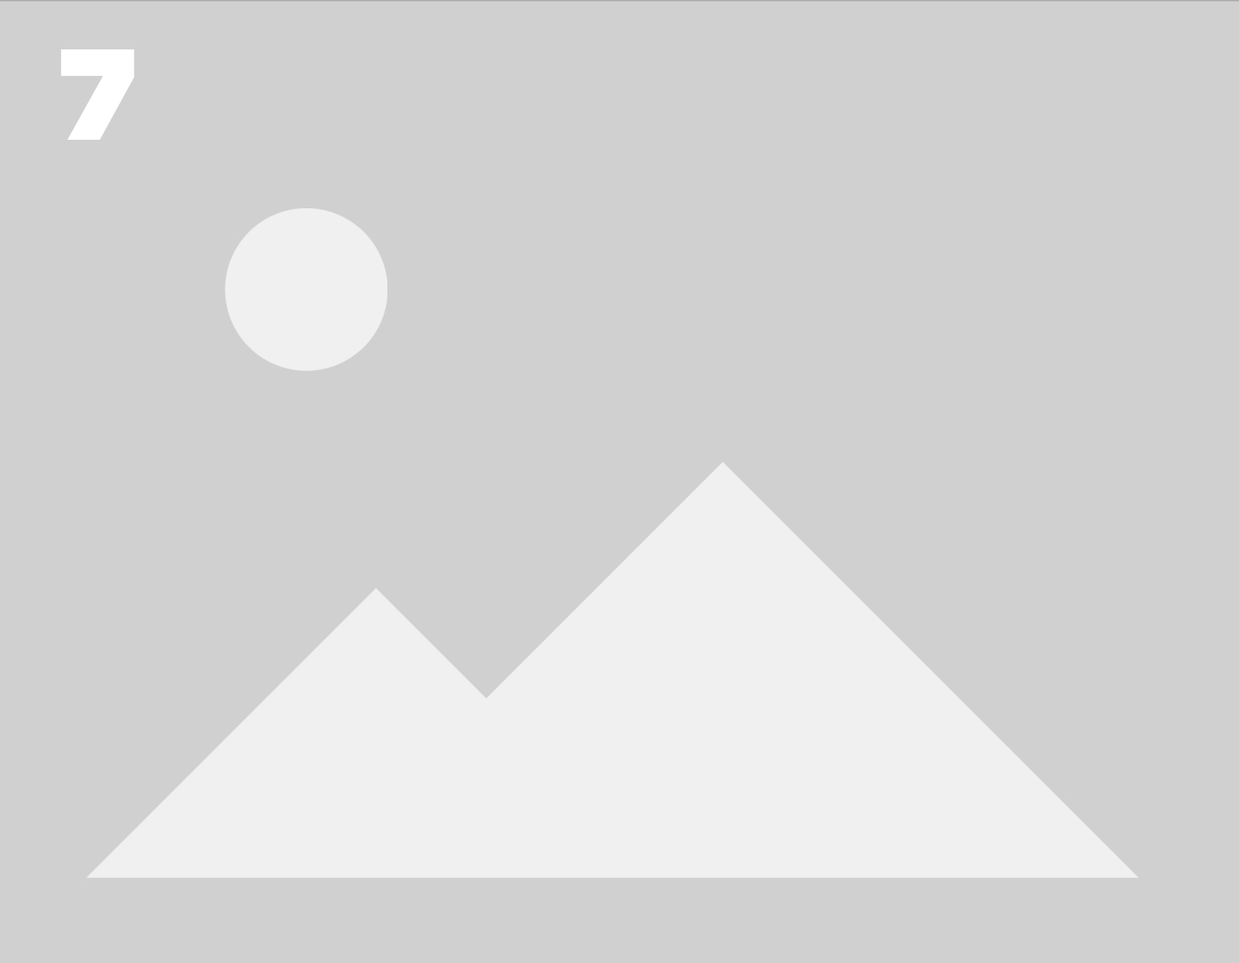
<style>
.page{position:relative;width:1239px;height:963px;background:#d0d0d0}
.page>*{position:absolute;margin:0}
.t1{font:129.7px "Alfarn2";color:#ffffff}
</style>
<div class="page">
<p class="t1" style="left:60px;top:49px;width:74px;height:91px">7</p>
</div>
